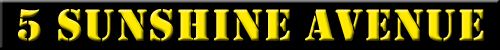
<style>
.page{position:relative;width:500px;height:50px;background:#000000}
.page>*{position:absolute;margin:0}
.t1{font:46.3px "Stencil";font-weight:bold}
</style>
<div class="page">
<p class="t1" style="left:18px;top:9px;width:466px;height:33px">5 Sunshine Avenue</p>
</div>
